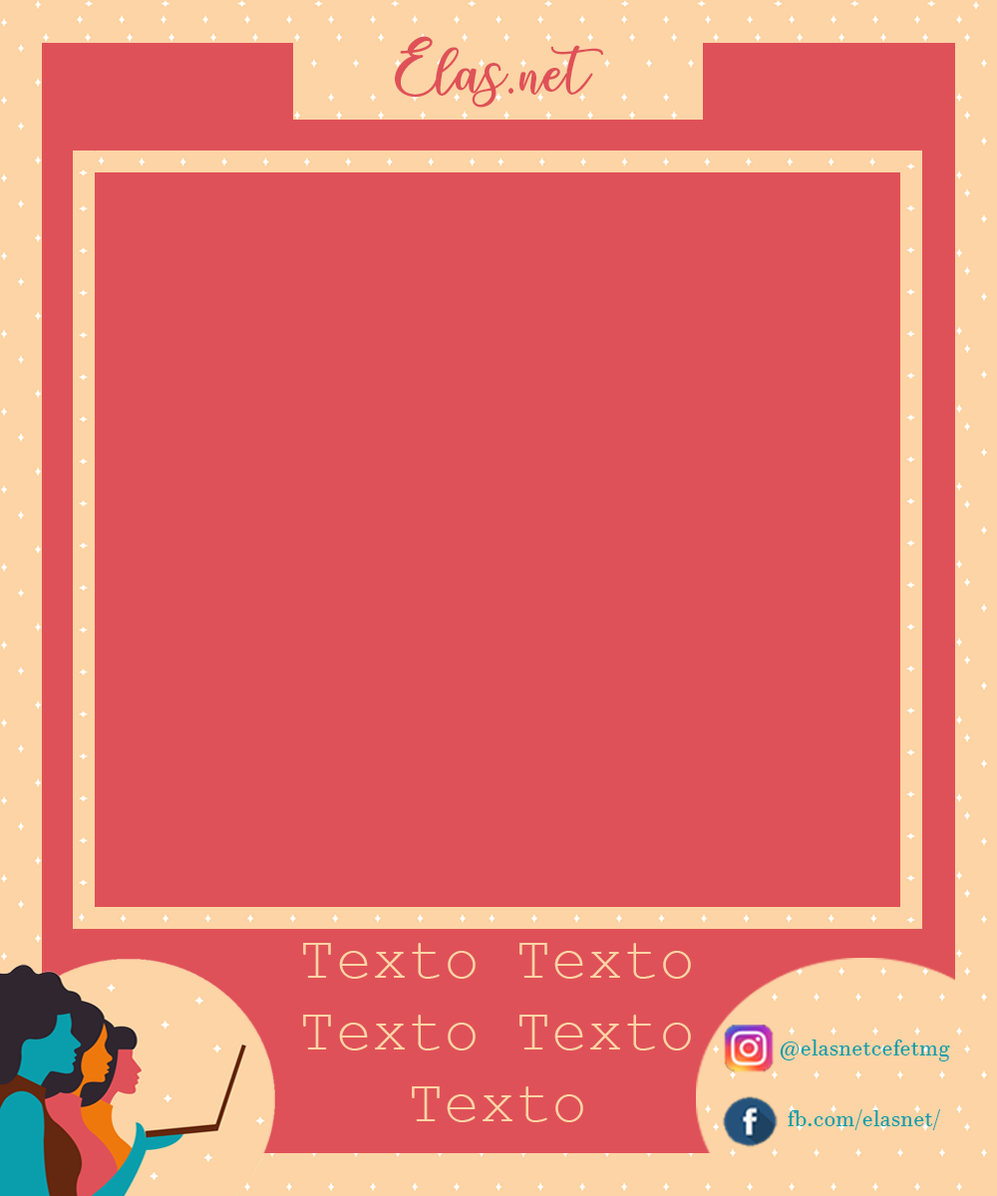
<style>
.page{position:relative;width:997px;height:1196px;background:#df5158}
.page>*{position:absolute;margin:0}
.t1{font:55.8px "charlinda-Regular";color:#df5158}
.t2{font:60px "CourierNewPSMT";color:#fcd4a5}
.t3{font:23.3px "JavaneseText";color:#0a9eac}
</style>
<div class="page">
<p class="t1" style="left:395px;top:36px;width:208px;height:72px">Elas.net</p>
<p class="t2" style="left:303px;top:943px;width:388px;height:179px;text-align:center">Texto Texto<br>Texto Texto<br>Texto</p>
<p class="t3" style="left:780px;top:1040px;width:170px;height:22px">@elasnetcefetmg</p>
<p class="t3" style="left:788px;top:1109px;width:152px;height:21px">fb.com/elasnet/</p>
</div>
